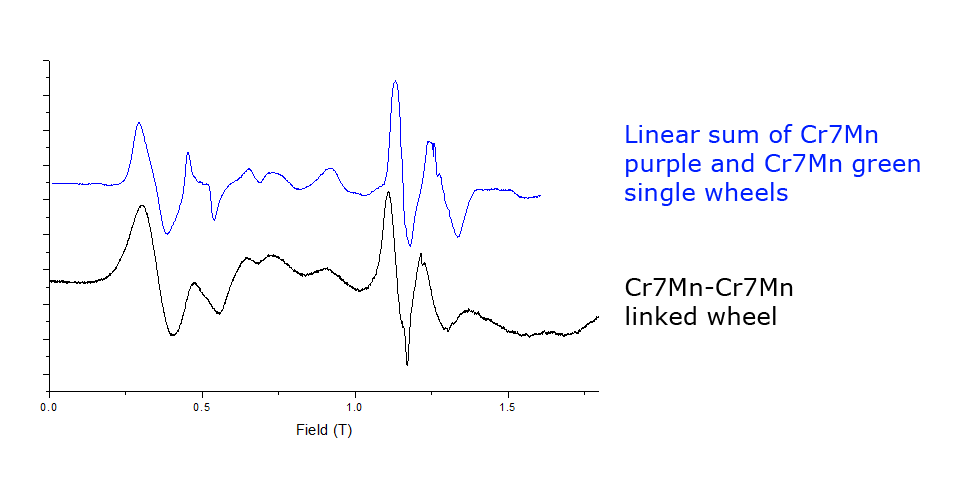
<style>
.page{position:relative;width:965px;height:480px;background:#ffffff}
.page>*{position:absolute;margin:0}
.t1{font:24px "Verdana";color:#001eff}
.t2{font:24px "Verdana";color:#000000}
</style>
<div class="page">
<p class="t1" style="left:625px;top:124px;width:295px;height:82px">Linear sum of Cr7Mn purple and Cr7Mn green single wheels</p>
<p class="t2" style="left:625px;top:278px;width:168px;height:47px">Cr7Mn-Cr7Mn linked wheel</p>
</div>
